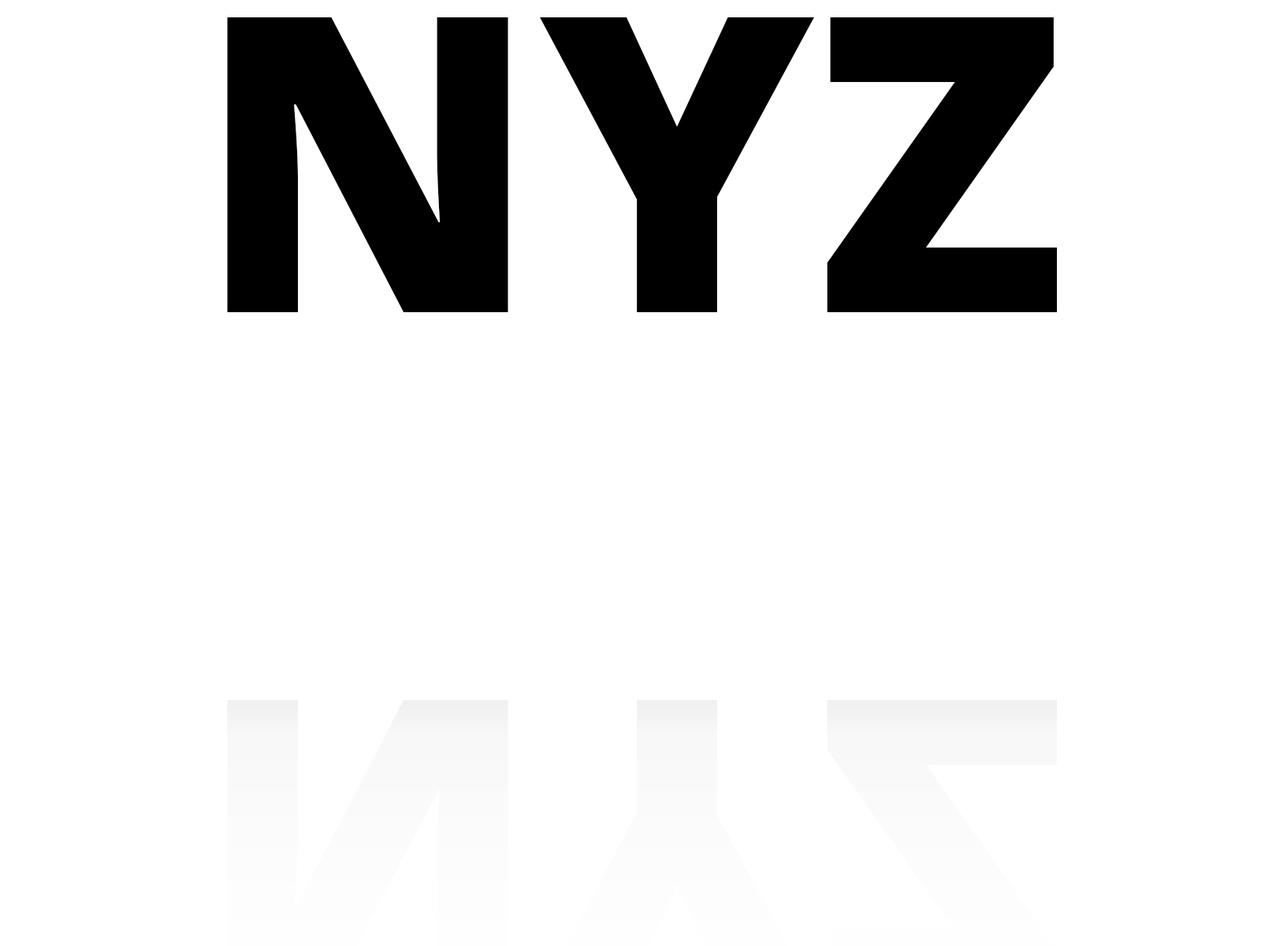
<style>
.page{position:relative;width:1261px;height:946px;background:#ffffff}
.page>*{position:absolute;margin:0}
.t1{font:413.3px "OpenSans-Extrabold";color:#000000}
</style>
<div class="page">
<p class="t1" style="left:227px;top:17px;width:831px;height:295px">NYZ</p>
</div>
